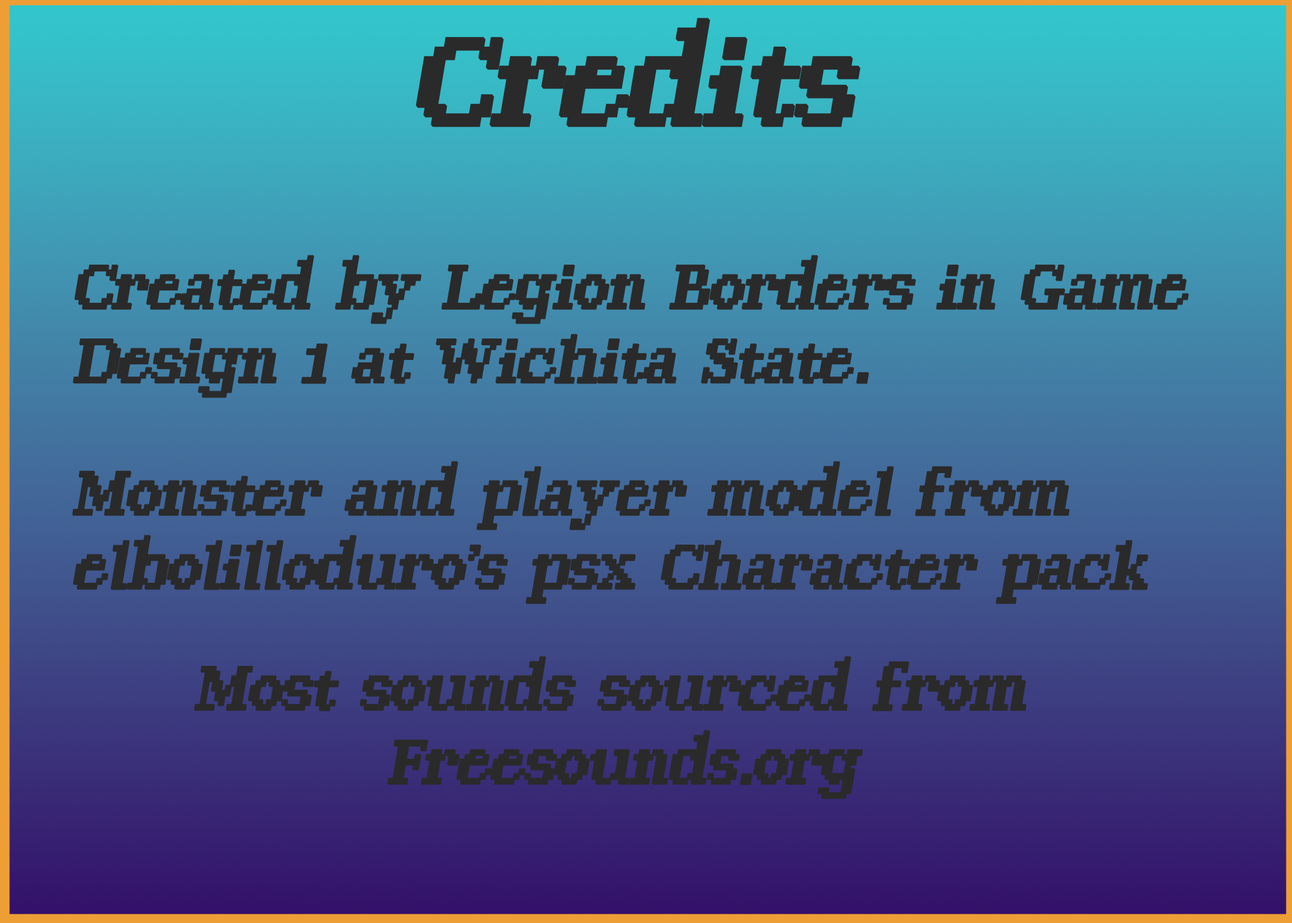
<style>
.page{position:relative;width:1292px;height:923px}
.page>*{position:absolute;margin:0}
.t1{font:152.6px "RetroByte";color:#2a2a2a;font-weight:bold;font-style:italic;scale:0.95 1}
.t2{font:76.3px "RetroByte";color:#2a2a2a;font-weight:bold;font-style:italic;scale:0.95 1}
</style>
<div class="page">
<p class="t1" style="left:415px;top:18px;width:446px;height:109px">Credits</p>
<p class="t2" style="left:73px;top:255px;width:1116px;height:143px">Created by Legion Borders in Game Design 1 at Wichita State.</p>
<p class="t2" style="left:72px;top:461px;width:1077px;height:143px">Monster and player model from <br>elbolilloduro's psx Character pack</p>
<p class="t2" style="left:194px;top:656px;width:833px;height:143px;text-align:center">Most sounds sourced from <br>Freesounds.org</p>
</div>
